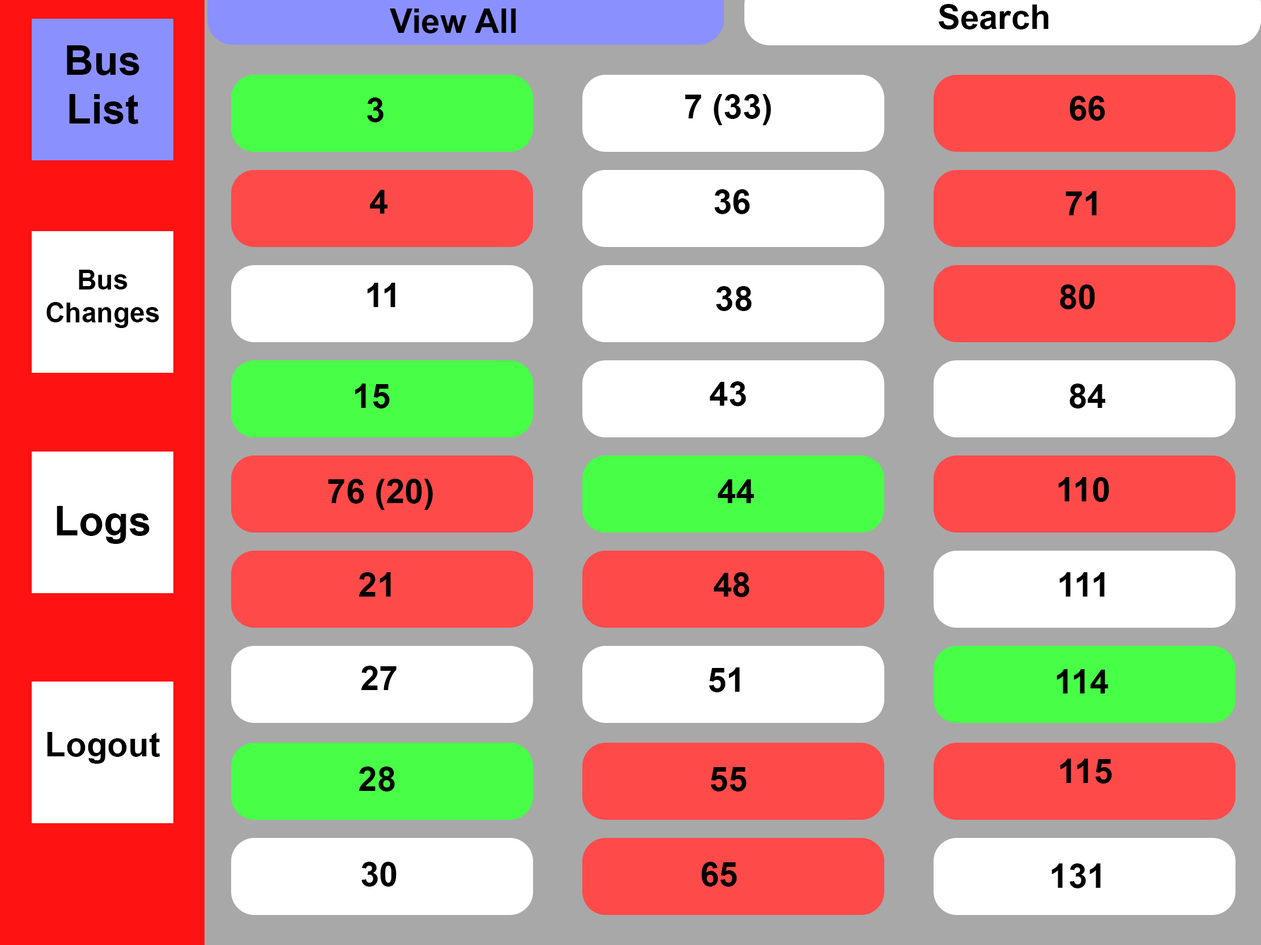
<style>
.page{position:relative;width:1261px;height:945px;background:#ffffff}
.page>*{position:absolute;margin:0}
.t1{font:34px "Arial-BoldMT";color:#000000}
.t2{font:40.8px "Arial-BoldMT";color:#000000}
.t3{font:27.2px "Arial-BoldMT";color:#000000}
</style>
<div class="page">
<p class="t1" style="left:939px;top:4px;width:110px;height:25px">Search</p>
<p class="t1" style="left:390px;top:9px;width:126px;height:24px">View All</p>
<p class="t2" style="left:67px;top:45px;width:72px;height:79px;text-align:center">Bus List</p>
<p class="t1" style="left:367px;top:97px;width:17px;height:25px">3</p>
<p class="t1" style="left:685px;top:94px;width:86px;height:31px">7 (33)</p>
<p class="t1" style="left:1070px;top:96px;width:36px;height:25px">66</p>
<p class="t1" style="left:370px;top:190px;width:18px;height:24px">4</p>
<p class="t1" style="left:715px;top:189px;width:35px;height:25px">36</p>
<p class="t1" style="left:1066px;top:191px;width:31px;height:24px">71</p>
<p class="t3" style="left:46px;top:270px;width:113px;height:58px;text-align:center">Bus Changes</p>
<p class="t1" style="left:367px;top:283px;width:29px;height:24px">11</p>
<p class="t1" style="left:716px;top:286px;width:36px;height:25px">38</p>
<p class="t1" style="left:1060px;top:284px;width:35px;height:25px">80</p>
<p class="t1" style="left:355px;top:384px;width:35px;height:25px">15</p>
<p class="t1" style="left:710px;top:381px;width:36px;height:25px">43</p>
<p class="t1" style="left:1070px;top:384px;width:36px;height:25px">84</p>
<p class="t1" style="left:328px;top:479px;width:105px;height:31px">76 (20)</p>
<p class="t1" style="left:718px;top:479px;width:36px;height:24px">44</p>
<p class="t1" style="left:1059px;top:477px;width:51px;height:25px">110</p>
<p class="t2" style="left:57px;top:506px;width:93px;height:38px">Logs</p>
<p class="t1" style="left:359px;top:572px;width:32px;height:25px">21</p>
<p class="t1" style="left:714px;top:572px;width:36px;height:25px">48</p>
<p class="t1" style="left:1060px;top:572px;width:45px;height:25px">111</p>
<p class="t1" style="left:361px;top:666px;width:36px;height:24px">27</p>
<p class="t1" style="left:709px;top:668px;width:31px;height:25px">51</p>
<p class="t1" style="left:1057px;top:669px;width:51px;height:25px">114</p>
<p class="t1" style="left:47px;top:732px;width:113px;height:32px">Logout</p>
<p class="t1" style="left:1060px;top:759px;width:52px;height:25px">115</p>
<p class="t1" style="left:359px;top:767px;width:36px;height:25px">28</p>
<p class="t1" style="left:711px;top:767px;width:36px;height:25px">55</p>
<p class="t1" style="left:362px;top:862px;width:35px;height:25px">30</p>
<p class="t1" style="left:702px;top:862px;width:35px;height:25px">65</p>
<p class="t1" style="left:1052px;top:864px;width:49px;height:25px">131</p>
</div>
